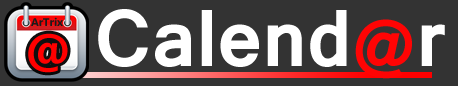
<style>
.page{position:relative;width:458px;height:86px;background:#333333}
.page>*{position:absolute;margin:0}
.t1{font:11px "MicrosoftTaiLe-Bold";color:#1b1b1b}
.t2{font:87px "Vrinda-Bold";letter-spacing:-0.005em;color:#ffffff}
.t3{font:71px "Vrinda-Bold";letter-spacing:-0.005em;color:#ff0404}
.t4{font:48px "MicrosoftTaiLe-Bold";color:#ff0000}
</style>
<div class="page">
<p class="t1" style="left:31px;top:17px;width:32px;height:9px">ArTrix</p>
<p class="t2" style="left:98px;top:9px;width:347px;height:70px">Calend<span class="t3">@</span>r</p>
<p class="t4" style="left:28px;top:33px;width:40px;height:40px">@</p>
</div>
